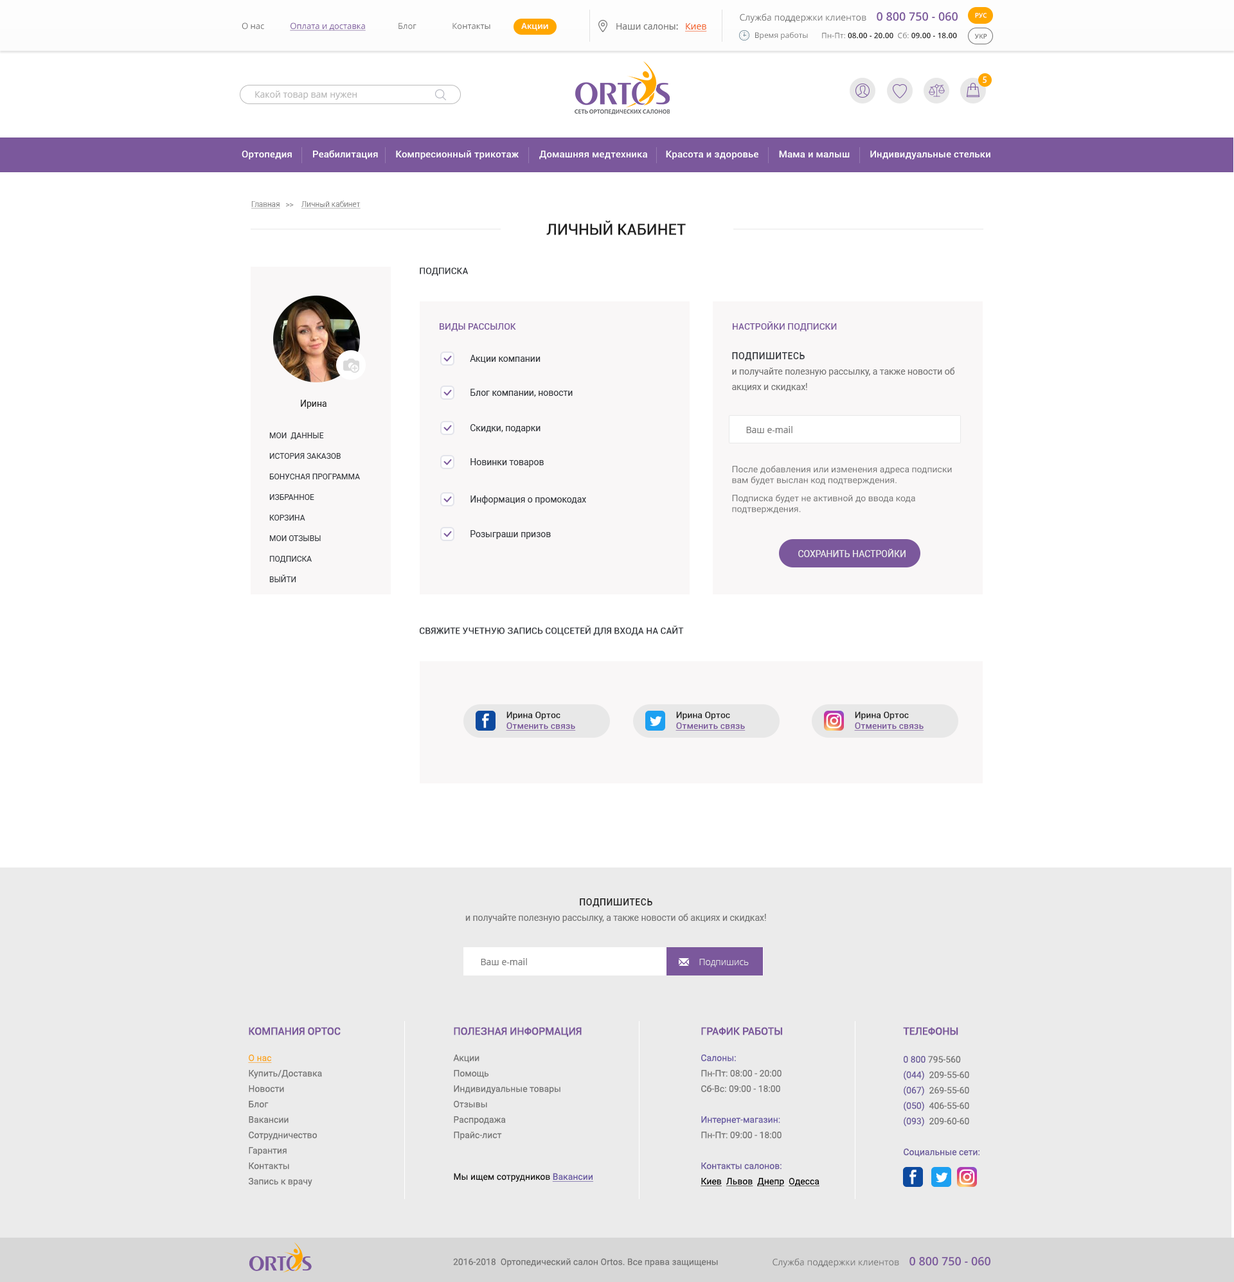
<style>
.page{position:relative;width:1234px;height:1282px;background:#ffffff}
.page>*{position:absolute;margin:0}
.t1{font:9px "OpenSans";color:#757575}
.t2{font:11.6px "OpenSans-Semibold";color:#7b589c}
.t3{font:6.4px "OpenSans-Semibold";color:#ffffff;text-transform:uppercase}
.t4{font:8.4px "OpenSans";color:#757575}
.t5{font:8.4px "OpenSans";color:#7b589c;text-decoration:underline}
.t6{font:8.4px "OpenSans-Semibold";color:#ffffff}
.t7{font:9px "OpenSans";color:#f26022;text-decoration:underline}
.t8{font:7.7px "OpenSans";color:#757575}
.t9{font:7.7px "OpenSans-Semibold";color:#212121}
.t10{font:6.4px "OpenSans-Semibold";color:#757575;text-transform:uppercase}
.t11{font:9px "MyriadPro-Regular";letter-spacing:0.1em;color:#ffffff;text-transform:uppercase}
.t12{font:9px "OpenSans";color:#b7b7b7}
.t13{font:9.6px "Roboto-Medium";letter-spacing:0.01em;color:#ffffff}
.t14{font:7.7px "Roboto-Light";color:#757575;text-decoration:underline}
.t15{font:7.7px "Roboto-Light";color:#757575}
.t16{font:15.4px "Roboto-Medium";color:#212121;text-transform:uppercase}
.t17{font:9px "Roboto-Medium";color:#34373d;text-transform:uppercase}
.t18{font:9px "Roboto-Medium";color:#7b589c;text-transform:uppercase}
.t19{font:9px/15.4px "Roboto-Regular";color:#757575}
.t20{font:9px "Roboto-Medium";letter-spacing:0.05em;color:#34373d;text-transform:uppercase}
.t21{font:9px "Roboto-Regular";color:#34373d}
.t22{font:9px "Roboto-Regular";color:#212121}
.t23{font:7.7px/20.6px "Roboto-Regular";color:#34373d;text-transform:uppercase}
.t24{font:9px "Roboto-Regular";color:#757575}
.t25{font:9px "Roboto-Regular";color:#ebebeb;text-transform:uppercase}
.t26{font:9px "Roboto-Medium";color:#7b589c;text-decoration:underline}
.t27{font:9px "Roboto-Medium";color:#212121}
.t28{font:9px "Roboto-Medium";letter-spacing:0.05em;color:#212121;text-transform:uppercase}
.t29{font:9px "OpenSans-Light";color:#ebebeb}
.t30{font:10.3px "Roboto-Medium";color:#7b589c;text-transform:uppercase}
.t31{font:9px/15.4px "Roboto-Regular";color:#faa61a;text-decoration:underline}
.t32{font:9px "Roboto-Regular";color:#181716}
.t33{font:9px "Roboto-Regular";color:#6858a1;text-decoration:underline}
.t34{font:9px/15.4px "Roboto-Regular";color:#6758a2}
.t35{font:9px/15.4px "Roboto-Regular";color:#68579a}
.t36{font:9px/15.4px "Roboto-Regular";color:#000000;text-decoration:underline}
</style>
<div class="page">
<p class="t1" style="left:740px;top:12px;width:218px;height:11px">Служба поддержки клиентов     <span class="t2">0 800 750 - 060</span></p>
<p class="t3" style="left:975px;top:13px;width:12px;height:5px">Рус</p>
<p class="t4" style="left:242px;top:22px;width:306px;height:9px">О нас       <span class="t5">Оплата и доставка</span>         Блог        Контакты   <span class="t6">Акции</span></p>
<p class="t1" style="left:616px;top:23px;width:91px;height:9px">Наши салоны: <span class="t7">Киев</span></p>
<p class="t8" style="left:755px;top:32px;width:53px;height:8px">Время работы</p>
<p class="t9" style="left:822px;top:32px;width:135px;height:7px"><span class="t8">Пн-Пт: </span>08.00 - 20.00<span class="t8">  Сб: </span>09.00 - 18.00</p>
<p class="t10" style="left:975px;top:33px;width:12px;height:6px">Укр</p>
<p class="t11" style="left:983px;top:76px;width:4px;height:7px">5</p>
<p class="t12" style="left:255px;top:91px;width:102px;height:9px">Какой товар вам нужен</p>
<p class="t13" style="left:242px;top:150px;width:749px;height:9px">Ортопедия        Реабилитация       Компресионный трикотаж         Домашняя медтехника    Красота и здоровье   Мама и малыш        Индивидуальные стельки</p>
<p class="t14" style="left:251px;top:201px;width:110px;height:8px">Главная<span class="t15">   &gt;&gt;   </span>Личный кабинет</p>
<p class="t16" style="left:546px;top:221px;width:140px;height:14px">Личный кабинет</p>
<p class="t17" style="left:420px;top:267px;width:49px;height:9px">Подписка</p>
<p class="t18" style="left:440px;top:323px;width:76px;height:9px">Виды рассылок</p>
<p class="t18" style="left:733px;top:321px;width:104px;height:11px">Настройки подписки</p>
<p class="t19" style="left:732px;top:352px;width:223px;height:40px"><span class="t20">Подпишитесь <br></span>и получайте полезную рассылку, а также новости об акциях и скидках!</p>
<p class="t21" style="left:470px;top:355px;width:71px;height:8px">Акции компании</p>
<p class="t21" style="left:471px;top:389px;width:102px;height:8px">Блог компании, новости</p>
<p class="t22" style="left:301px;top:400px;width:26px;height:9px">Ирина</p>
<p class="t21" style="left:470px;top:424px;width:71px;height:9px">Скидки, подарки</p>
<p class="t23" style="left:269px;top:433px;width:91px;height:149px">Мои  данные<br>История заказов<br>Бонусная программа<br>Избранное <br>Корзина<br>Мои отзывы<br>Подписка<br>Выйти</p>
<p class="t1" style="left:746px;top:426px;width:47px;height:7px">Ваш e-mail</p>
<p class="t21" style="left:471px;top:458px;width:73px;height:9px">Новинки товаров</p>
<p class="t24" style="left:732px;top:465px;width:220px;height:20px">После добавления или изменения адреса подписки вам будет выслан код подтверждения.</p>
<p class="t21" style="left:471px;top:496px;width:115px;height:9px">Информация о промокодах</p>
<p class="t24" style="left:732px;top:494px;width:183px;height:20px">Подписка будет не активной до ввода кода подтверждения.</p>
<p class="t21" style="left:471px;top:530px;width:80px;height:9px">Розыграши призов</p>
<p class="t25" style="left:798px;top:549px;width:108px;height:8px">Сохранить настройки</p>
<p class="t17" style="left:420px;top:626px;width:264px;height:10px">Свяжите учетную запись соцсетей для входа на сайт</p>
<p class="t26" style="left:506px;top:712px;width:70px;height:19px"><span class="t27">Ирина Ортос<br></span>Отменить связь</p>
<p class="t26" style="left:676px;top:712px;width:70px;height:19px"><span class="t27">Ирина Ортос<br></span>Отменить связь</p>
<p class="t26" style="left:854px;top:712px;width:70px;height:19px"><span class="t27">Ирина Ортос<br></span>Отменить связь</p>
<p class="t19" style="left:465px;top:899px;width:301px;height:24px;text-align:center"><span class="t28">Подпишитесь <br></span>и получайте полезную рассылку, а также новости об акциях и скидках!</p>
<p class="t1" style="left:481px;top:959px;width:46px;height:7px">Ваш e-mail</p>
<p class="t29" style="left:699px;top:959px;width:50px;height:9px">Подпишись</p>
<p class="t19" style="left:248px;top:1027px;width:93px;height:160px"><span class="t30">Компания Ортос<br><br></span><span class="t31">О нас<br></span>Купить/Доставка<br>Новости<br>Блог<br>Вакансии<br>Сотрудничество<br>Гарантия<br>Контакты<br>Запись к врачу</p>
<p class="t19" style="left:453px;top:1027px;width:140px;height:155px"><span class="t30">Полезная информация<br><br></span>Акции<br>Помощь<br>Индивидуальные товары<br>Отзывы<br>Распродажа<br>Прайс-лист<br><br><br><span class="t32">Мы ищем сотрудников </span><span class="t33">Вакансии</span></p>
<p class="t19" style="left:701px;top:1027px;width:119px;height:160px"><span class="t30">График работы<br><br></span><span class="t34">Салоны:<br></span>Пн-Пт: 08:00 - 20:00 <br>Сб-Вс: 09:00 - 18:00<br><br><span class="t34">Интернет-магазин:<br></span>Пн-Пт: 09:00 - 18:00<br><br><span class="t35">Контакты салонов:<br></span><span class="t36">Киев  Львов  Днепр  Одесса</span></p>
<p class="t35" style="left:903px;top:1027px;width:77px;height:130px"><span class="t30">Телефоны<br><br></span>0 800 <span class="t19">795-560<br></span>(044)  <span class="t19">209-55-60<br></span>(067)  <span class="t19">269-55-60<br></span>(050)  <span class="t19">406-55-60<br></span>(093)  <span class="t19">209-60-60<br><br></span>Социальные сети:</p>
<p class="t24" style="left:453px;top:1259px;width:265px;height:9px">2016-2018  Ортопедический салон Ortos. Все права защищены</p>
<p class="t1" style="left:773px;top:1257px;width:218px;height:11px">Служба поддержки клиентов     <span class="t2">0 800 750 - 060</span></p>
</div>
